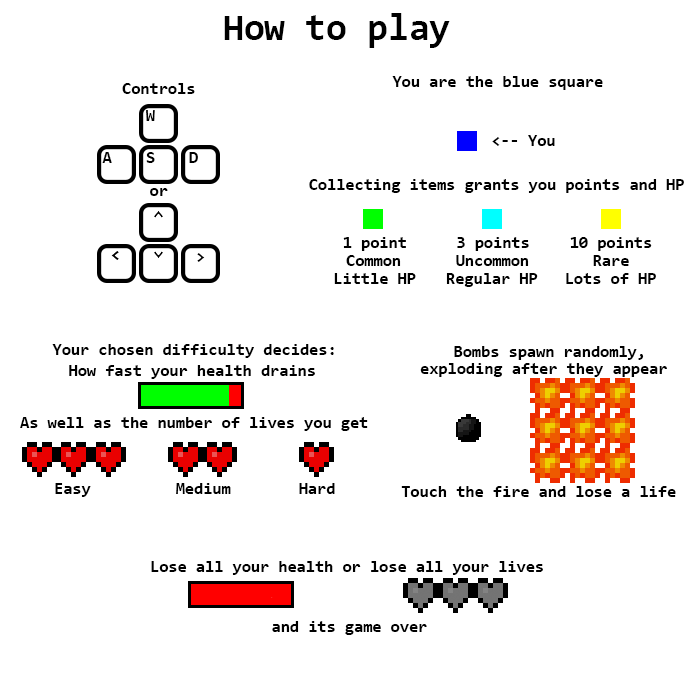
<style>
.page{position:relative;width:700px;height:700px;background:#ffffff}
.page>*{position:absolute;margin:0}
.t1{font:37.5px "Consolas-Bold";color:#000000}
.t2{font:16.7px "Consolas-Bold";color:#000000}
</style>
<div class="page">
<p class="t1" style="left:224px;top:13px;width:226px;height:35px">How to play</p>
<p class="t2" style="left:392px;top:76px;width:211px;height:14px">You are the blue square</p>
<p class="t2" style="left:122px;top:83px;width:73px;height:11px">Controls</p>
<p class="t2" style="left:146px;top:110px;width:9px;height:11px">W</p>
<p class="t2" style="left:492px;top:135px;width:63px;height:11px">&lt;-- You</p>
<p class="t2" style="left:102px;top:152px;width:10px;height:11px">A</p>
<p class="t2" style="left:146px;top:152px;width:9px;height:11px">S</p>
<p class="t2" style="left:189px;top:152px;width:9px;height:11px">D</p>
<p class="t2" style="left:309px;top:179px;width:375px;height:14px">Collecting items grants you points and HP</p>
<p class="t2" style="left:150px;top:188px;width:18px;height:8px">or</p>
<p class="t2" style="left:343px;top:237px;width:63px;height:14px">1 point</p>
<p class="t2" style="left:457px;top:237px;width:72px;height:14px">3 points</p>
<p class="t2" style="left:570px;top:237px;width:82px;height:14px">10 points</p>
<p class="t2" style="left:197px;top:253px;width:8px;height:9px">&gt;</p>
<p class="t2" style="left:346px;top:255px;width:55px;height:11px">Common</p>
<p class="t2" style="left:456px;top:255px;width:73px;height:11px">Uncommon</p>
<p class="t2" style="left:593px;top:255px;width:36px;height:11px">Rare</p>
<p class="t2" style="left:334px;top:273px;width:82px;height:11px">Little HP</p>
<p class="t2" style="left:446px;top:273px;width:92px;height:14px">Regular HP</p>
<p class="t2" style="left:566px;top:273px;width:90px;height:11px">Lots of HP</p>
<p class="t2" style="left:52px;top:344px;width:282px;height:14px">Your chosen difficulty decides:</p>
<p class="t2" style="left:454px;top:346px;width:190px;height:14px">Bombs spawn randomly,</p>
<p class="t2" style="left:69px;top:365px;width:246px;height:14px">How fast your health drains</p>
<p class="t2" style="left:420px;top:363px;width:247px;height:14px">exploding after they appear</p>
<p class="t2" style="left:20px;top:417px;width:348px;height:14px">As well as the number of lives you get</p>
<p class="t2" style="left:55px;top:483px;width:36px;height:14px">Easy</p>
<p class="t2" style="left:176px;top:483px;width:55px;height:11px">Medium</p>
<p class="t2" style="left:299px;top:483px;width:36px;height:11px">Hard</p>
<p class="t2" style="left:401px;top:486px;width:275px;height:11px">Touch the fire and lose a life</p>
<p class="t2" style="left:151px;top:561px;width:392px;height:14px">Lose all your health or lose all your lives</p>
<p class="t2" style="left:272px;top:621px;width:155px;height:14px">and its game over</p>
</div>
